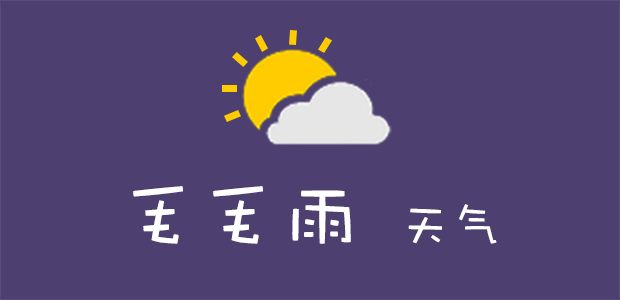
<style>
.page{position:relative;width:620px;height:300px;background:#4d3f70}
.page>*{position:absolute;margin:0}
.t1{font:80px "DFWaWaSC-W5";color:#ffffff}
.t2{font:50px "DFWaWaSC-W5";color:#ffffff}
</style>
<div class="page">
<p class="t1" style="left:133px;top:186px;width:364px;height:58px">毛毛雨  <span class="t2">天气</span></p>
</div>
